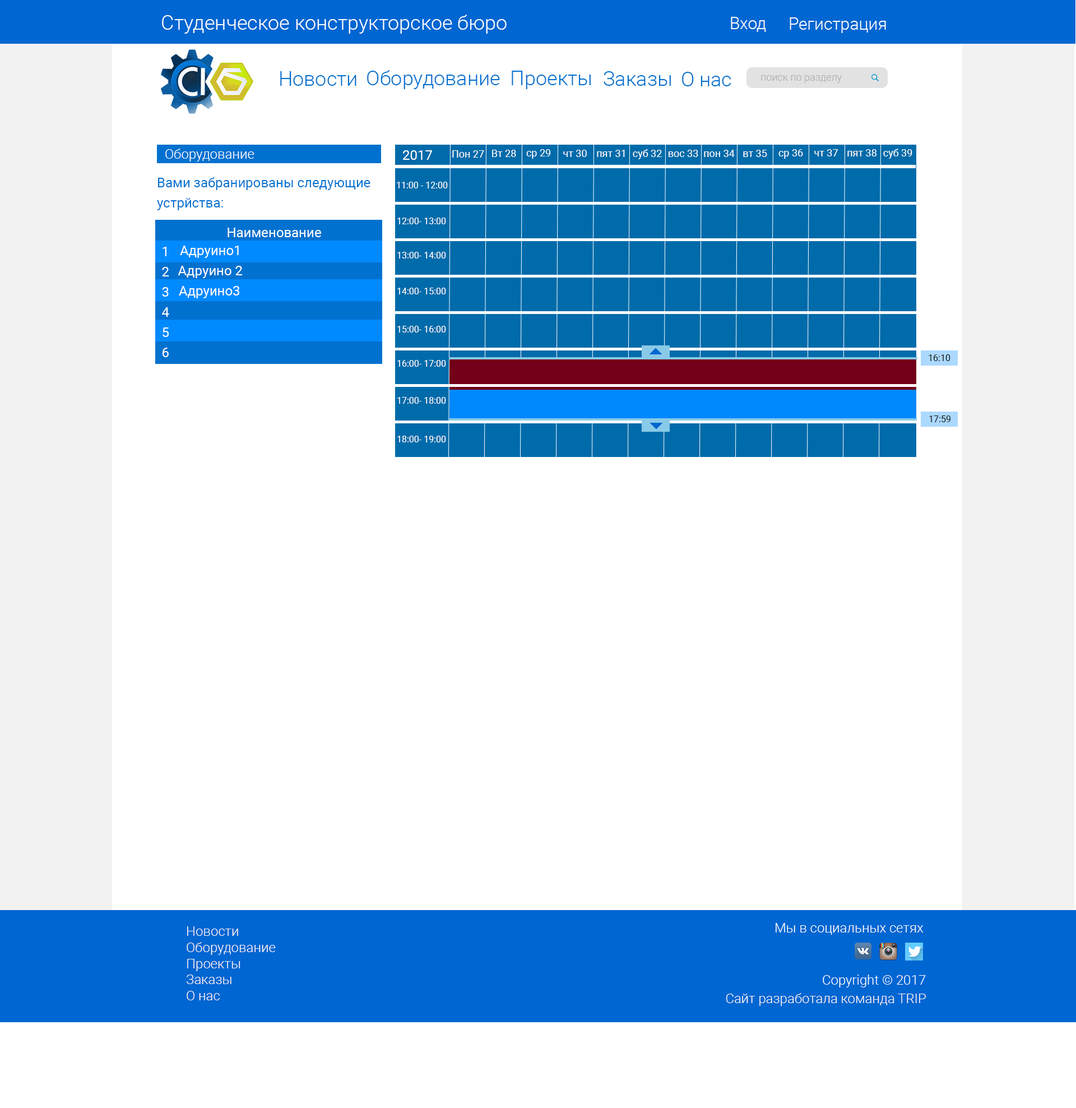
<style>
.page{position:relative;width:1076px;height:1108px;background:#ffffff}
.page>*{position:absolute;margin:0}
.t1{font:20.2px "Roboto-Light";color:#f8fdff}
.t2{font:16.8px "Roboto-Light";color:#f8fdff}
.t3{font:20.2px "Roboto-Light";color:#0171d0}
.t4{font:10.1px "Roboto-Light";color:#b3adad}
.t5{font:13.5px "Roboto-Light";color:#ffffff}
.t6{font:10.1px "Roboto-Regular";color:#ffffff}
.t7{font:13.5px "Roboto-Regular";color:#ffffff}
.t8{font:13.5px/20.2px "Roboto-Regular";color:#0171d0}
.t9{font:9px "Roboto-Regular";color:#ffffff}
.t10{font:13.5px/20.2px "Roboto-Regular";color:#ffffff}
.t11{font:9px "Roboto-Regular";color:#0e0e0e}
.t12{font:13.5px "Roboto-Light";color:#f8f3f3}
.t13{font:13.5px "Roboto-Light";color:#f8fdff}
</style>
<div class="page">
<p class="t1" style="left:162px;top:15px;width:345px;height:19px">Студенческое конструкторское бюро</p>
<p class="t2" style="left:731px;top:17px;width:35px;height:15px">Вход</p>
<p class="t2" style="left:790px;top:17px;width:96px;height:16px">Регистрация</p>
<p class="t3" style="left:280px;top:71px;width:77px;height:15px">Новости</p>
<p class="t3" style="left:367px;top:70px;width:133px;height:19px">Оборудование</p>
<p class="t3" style="left:512px;top:71px;width:79px;height:18px">Проекты</p>
<p class="t3" style="left:604px;top:71px;width:67px;height:15px">Заказы</p>
<p class="t3" style="left:682px;top:72px;width:50px;height:14px">О нас</p>
<p class="t4" style="left:761px;top:75px;width:81px;height:8px">поиск по разделу</p>
<p class="t5" style="left:165px;top:149px;width:90px;height:12px">Оборудование</p>
<p class="t6" style="left:492px;top:150px;width:24px;height:7px">Вт 28</p>
<p class="t6" style="left:526px;top:149px;width:25px;height:10px">ср 29</p>
<p class="t6" style="left:563px;top:150px;width:24px;height:7px">чт 30</p>
<p class="t6" style="left:597px;top:150px;width:28px;height:7px">пят 31</p>
<p class="t6" style="left:633px;top:149px;width:29px;height:10px">суб 32</p>
<p class="t6" style="left:669px;top:150px;width:30px;height:7px">вос 33</p>
<p class="t6" style="left:704px;top:150px;width:31px;height:7px">пон 34</p>
<p class="t6" style="left:743px;top:150px;width:24px;height:7px">вт 35</p>
<p class="t6" style="left:779px;top:149px;width:24px;height:10px">ср 36</p>
<p class="t6" style="left:815px;top:149px;width:23px;height:7px">чт 37</p>
<p class="t6" style="left:848px;top:149px;width:29px;height:7px">пят 38</p>
<p class="t6" style="left:884px;top:149px;width:29px;height:10px">суб 39</p>
<p class="t7" style="left:403px;top:150px;width:29px;height:10px">2017</p>
<p class="t6" style="left:452px;top:150px;width:32px;height:8px">Пон 27</p>
<p class="t8" style="left:157px;top:177px;width:214px;height:33px">Вами забранированы следующие <br>устрйства:</p>
<p class="t9" style="left:397px;top:182px;width:51px;height:6px">11:00 - 12:00</p>
<p class="t9" style="left:397px;top:218px;width:49px;height:6px">12:00- 13:00</p>
<p class="t7" style="left:228px;top:228px;width:93px;height:9px">Наименование</p>
<p class="t7" style="left:180px;top:246px;width:59px;height:12px">Адруино1</p>
<p class="t10" style="left:162px;top:247px;width:7px;height:110px;text-align:center">1<br>2<br>3<br>4<br>5<br>6</p>
<p class="t9" style="left:397px;top:252px;width:49px;height:6px">13:00- 14:00</p>
<p class="t7" style="left:178px;top:266px;width:65px;height:12px">Адруино 2</p>
<p class="t7" style="left:179px;top:286px;width:60px;height:12px">Адруино3</p>
<p class="t9" style="left:397px;top:288px;width:49px;height:6px">14:00- 15:00</p>
<p class="t9" style="left:397px;top:326px;width:49px;height:6px">15:00- 16:00</p>
<p class="t9" style="left:397px;top:360px;width:49px;height:7px">16:00- 17:00</p>
<p class="t11" style="left:929px;top:354px;width:22px;height:7px">16:10</p>
<p class="t9" style="left:397px;top:397px;width:49px;height:7px">17:00- 18:00</p>
<p class="t11" style="left:930px;top:415px;width:21px;height:7px">17:59</p>
<p class="t9" style="left:397px;top:436px;width:49px;height:6px">18:00- 19:00</p>
<p class="t12" style="left:187px;top:926px;width:89px;height:74px">Новости<br>Оборудование<br>Проекты<br>Заказы<br>О нас</p>
<p class="t13" style="left:776px;top:923px;width:148px;height:12px">Мы в социальных сетях</p>
<p class="t13" style="left:823px;top:974px;width:103px;height:13px">Copyright © 2017</p>
<p class="t12" style="left:726px;top:993px;width:200px;height:13px">Сайт разработала команда TRIP</p>
</div>
